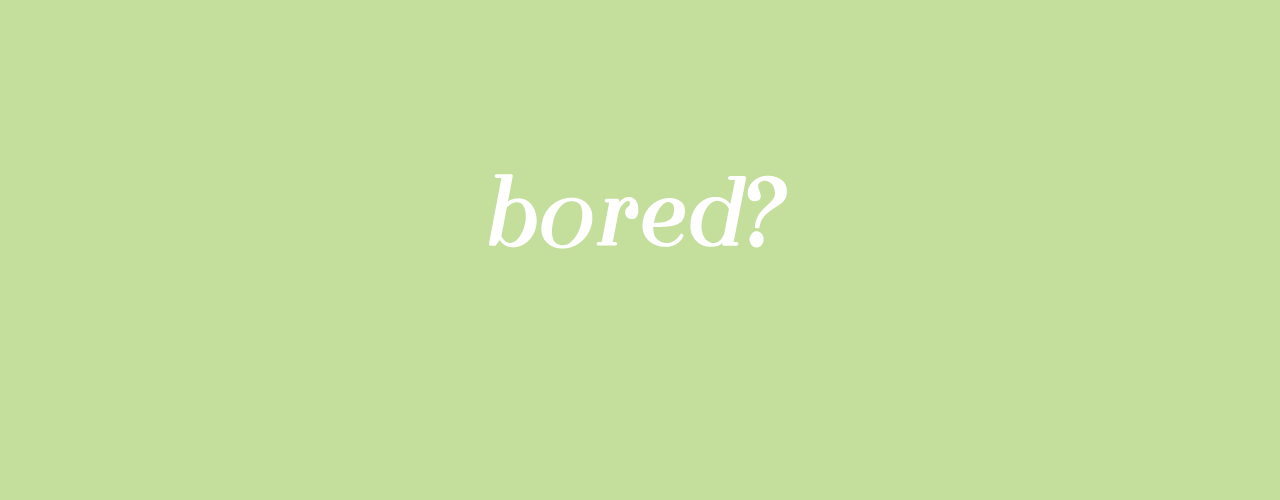
<style>
.page{position:relative;width:1280px;height:500px;background:#c4df9b}
.page>*{position:absolute;margin:0}
.t1{font:97.2px "Florence-Regular";letter-spacing:0.02em;color:#ffffff;font-weight:bold;scale:0.83 1}
</style>
<div class="page">
<p class="t1" style="left:489px;top:174px;width:298px;height:75px">bored?</p>
</div>
